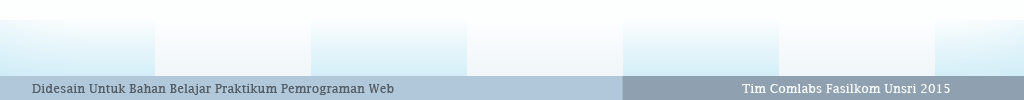
<style>
.page{position:relative;width:1024px;height:100px;background:#fcfffe}
.page>*{position:absolute;margin:0}
.t1{font:12px "LucidaFax";color:#555f68}
.t2{font:12px "LucidaFax";color:#f7faf8}
</style>
<div class="page">
<p class="t1" style="left:32px;top:84px;width:362px;height:11px">Didesain Untuk Bahan Belajar Praktikum Pemrograman Web</p>
<p class="t2" style="left:742px;top:84px;width:208px;height:9px">Tim Comlabs Fasilkom Unsri 2015</p>
</div>
